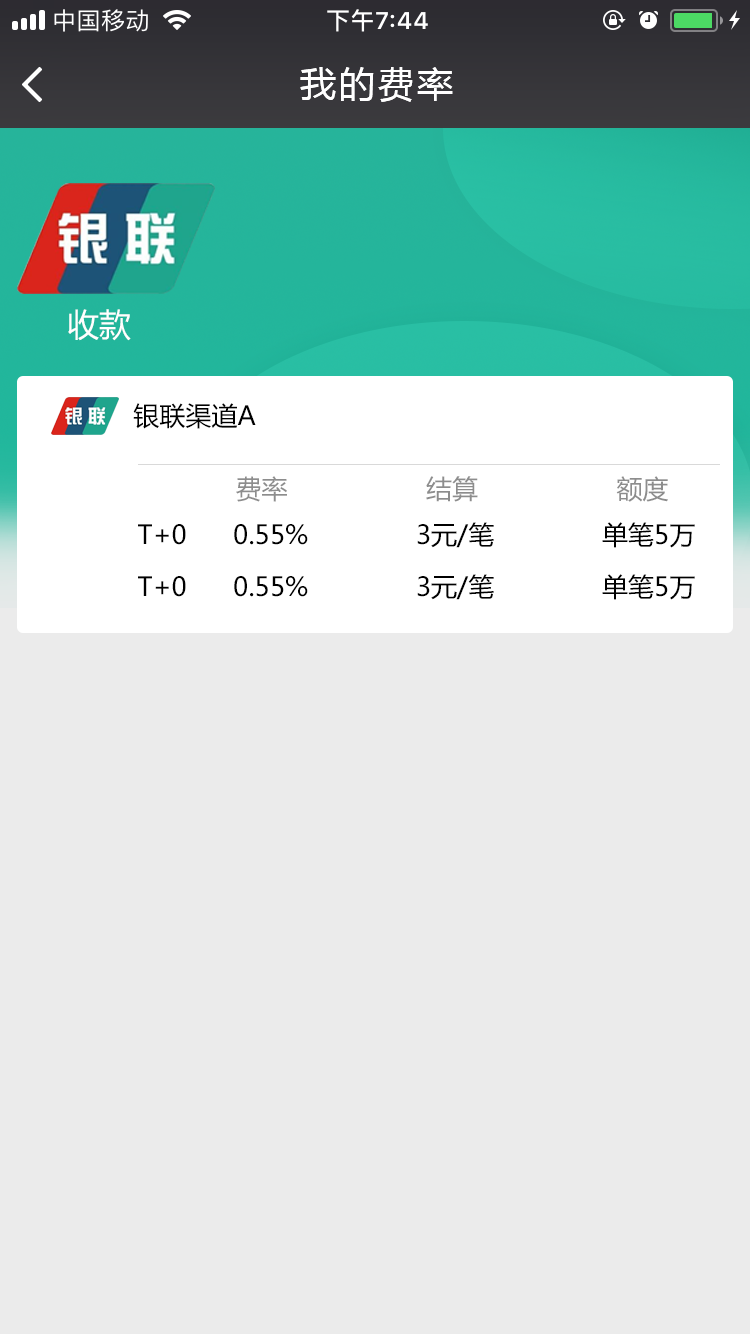
<style>
.page{position:relative;width:750px;height:1334px;background:#ebebeb}
.page>*{position:absolute;margin:0}
.t1{font:36px "MicrosoftYaHei";letter-spacing:0.08em;color:#ffffff}
.t2{font:32px "MicrosoftYaHei";color:#ffffff}
.t3{font:26px "MicrosoftYaHei";color:#000000}
.t4{font:26px "MicrosoftYaHei";color:#8d8d8d}
</style>
<div class="page">
<p class="t1" style="left:300px;top:67px;width:153px;height:35px">我的费率</p>
<p class="t2" style="left:68px;top:309px;width:63px;height:32px">收款</p>
<p class="t3" style="left:133px;top:403px;width:123px;height:26px">银联渠道A</p>
<p class="t4" style="left:236px;top:476px;width:432px;height:26px">费率                  结算                  额度</p>
<p class="t3" style="left:138px;top:522px;width:557px;height:26px">T+0      0.55%              3元/笔              单笔5万</p>
<p class="t3" style="left:138px;top:574px;width:557px;height:26px">T+0      0.55%              3元/笔              单笔5万</p>
</div>
